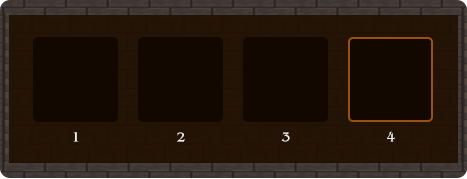
<style>
.page{position:relative;width:467px;height:179px;background:#120800}
.page>*{position:absolute;margin:0}
.t1{font:13.8px "AGBenguiatCyrBook";letter-spacing:0.02em;color:#f1f0f0}
</style>
<div class="page">
<p class="t1" style="left:73px;top:132px;width:6px;height:10px">1</p>
<p class="t1" style="left:177px;top:132px;width:8px;height:10px">2</p>
<p class="t1" style="left:281px;top:132px;width:9px;height:10px">3</p>
<p class="t1" style="left:387px;top:131px;width:8px;height:11px">4</p>
</div>
